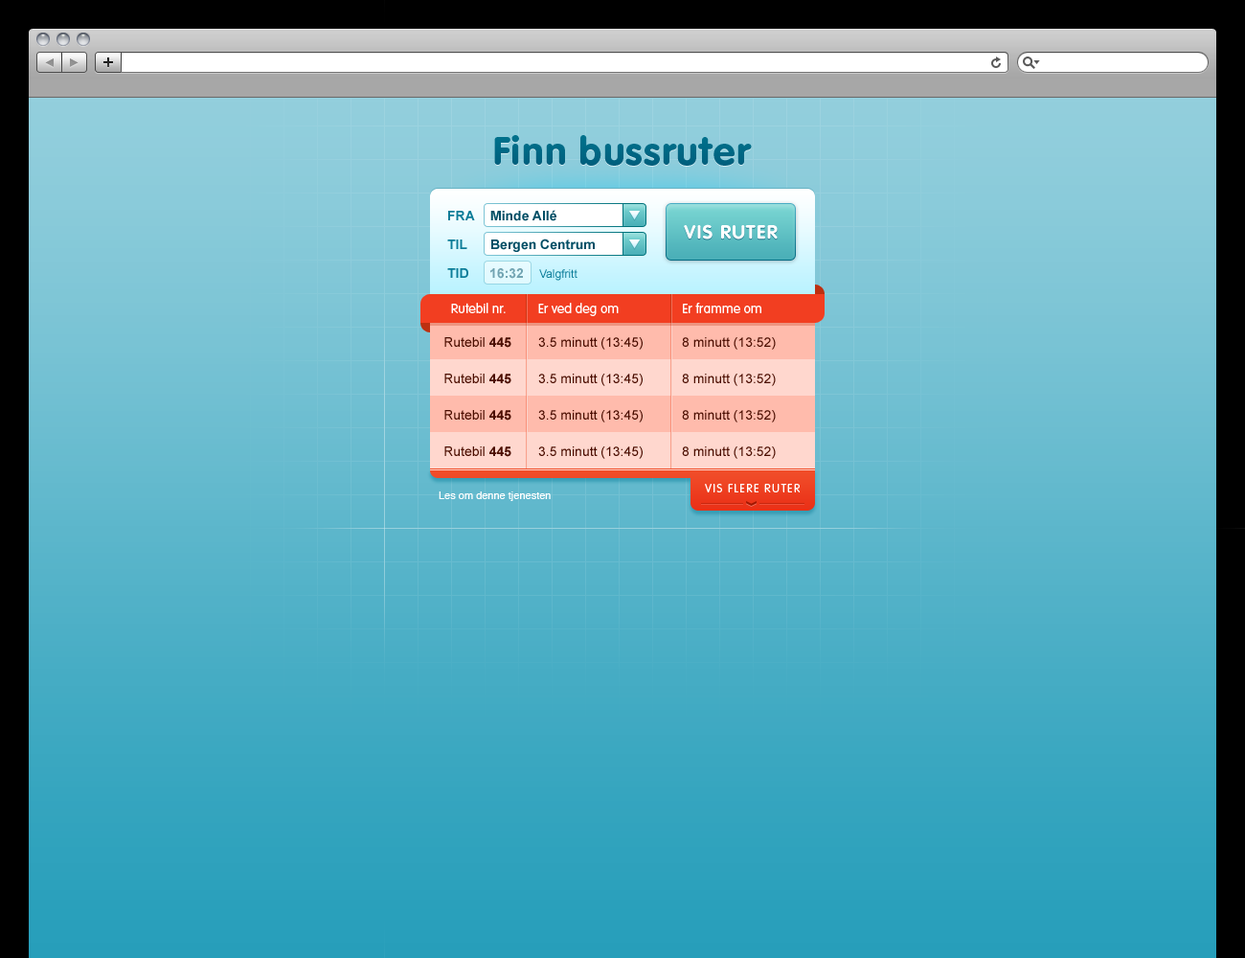
<style>
.page{position:relative;width:1245px;height:958px}
.page>*{position:absolute;margin:0}
.t1{font:38.3px "VAGRoundedStd-Black";letter-spacing:0.04em;color:#00718c}
.t2{font:13.4px "Arial-BoldMT";color:#004e65}
.t3{font:13.4px "Arial-BoldMT";color:#0b7c98;text-transform:uppercase}
.t4{font:19.2px "VAGRoundedStd-Bold";letter-spacing:0.06em;color:#ffffff;text-transform:uppercase}
.t5{font:13.4px "Arial-BoldMT";color:#0b7d99;text-transform:uppercase}
.t6{font:13.4px "Arial-BoldMT";color:#71a4b2}
.t7{font:11.5px "ArialMT";color:#0b7d99}
.t8{font:13.4px "VAGRoundedStd-Light";color:#ffffff}
.t9{font:13.4px "ArialMT";color:#4b0e01}
.t10{font:13.4px "Arial-BoldMT";color:#4b0e01}
.t11{font:11.5px "VAGRoundedStd-Light";letter-spacing:0.12em;color:#ffffff;text-transform:uppercase}
.t12{font:10.5px "Helvetica";color:#ffffff}
</style>
<div class="page">
<p class="t1" style="left:494px;top:135px;width:258px;height:31px">Finn bussruter</p>
<p class="t2" style="left:490px;top:210px;width:66px;height:11px">Minde Allé</p>
<p class="t3" style="left:448px;top:211px;width:27px;height:9px">Fra</p>
<p class="t4" style="left:684px;top:224px;width:94px;height:15px">Vis ruter</p>
<p class="t5" style="left:447px;top:239px;width:20px;height:10px">Til</p>
<p class="t2" style="left:491px;top:238px;width:104px;height:14px">Bergen Centrum</p>
<p class="t5" style="left:447px;top:268px;width:21px;height:10px">Tid</p>
<p class="t6" style="left:490px;top:268px;width:33px;height:11px">16:32</p>
<p class="t7" style="left:539px;top:269px;width:39px;height:12px">Valgfritt</p>
<p class="t8" style="left:451px;top:303px;width:55px;height:10px">Rutebil nr.</p>
<p class="t8" style="left:538px;top:303px;width:81px;height:13px">Er ved deg om</p>
<p class="t8" style="left:683px;top:303px;width:78px;height:10px">Er framme om</p>
<p class="t9" style="left:444px;top:337px;width:67px;height:11px">Rutebil <span class="t10">445</span></p>
<p class="t9" style="left:538px;top:337px;width:105px;height:13px">3.5 minutt (13:45)</p>
<p class="t9" style="left:682px;top:337px;width:94px;height:13px">8 minutt (13:52)</p>
<p class="t9" style="left:444px;top:374px;width:67px;height:10px">Rutebil <span class="t10">445</span></p>
<p class="t9" style="left:538px;top:374px;width:105px;height:12px">3.5 minutt (13:45)</p>
<p class="t9" style="left:682px;top:374px;width:94px;height:12px">8 minutt (13:52)</p>
<p class="t9" style="left:444px;top:410px;width:67px;height:10px">Rutebil <span class="t10">445</span></p>
<p class="t9" style="left:538px;top:410px;width:105px;height:12px">3.5 minutt (13:45)</p>
<p class="t9" style="left:682px;top:410px;width:94px;height:12px">8 minutt (13:52)</p>
<p class="t9" style="left:444px;top:446px;width:67px;height:11px">Rutebil <span class="t10">445</span></p>
<p class="t9" style="left:538px;top:446px;width:105px;height:13px">3.5 minutt (13:45)</p>
<p class="t9" style="left:682px;top:446px;width:94px;height:13px">8 minutt (13:52)</p>
<p class="t11" style="left:705px;top:484px;width:96px;height:8px">Vis flere ruter</p>
<p class="t12" style="left:439px;top:491px;width:112px;height:10px">Les om denne tjenesten</p>
</div>
